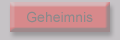
<style>
.page{position:relative;width:120px;height:40px;background:#d7898b}
.page>*{position:absolute;margin:0}
.t1{font:14px "ArialMT";color:#8b898b}
</style>
<div class="page">
<p class="t1" style="left:27px;top:11px;width:66px;height:12px">Geheimnis</p>
</div>
